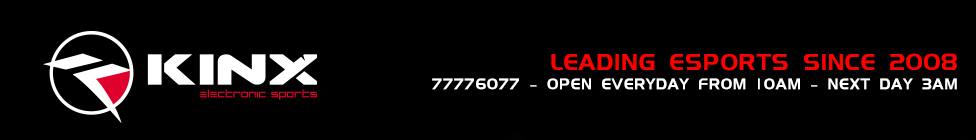
<style>
.page{position:relative;width:976px;height:140px;background:#000000}
.page>*{position:absolute;margin:0}
.t1{font:16px "AGOmniusBold";color:#ffffff}
.t2{font:24px "AGOmniusBold";color:#ff0000}
</style>
<div class="page">
<p class="t1" style="left:432px;top:53px;width:525px;height:37px;text-align:right"><span class="t2">LEADING ESPORTS SINCE 2008<br></span>77776077 - OPEN EVERYDAY FROM 10AM - NEXT DAY 3AM</p>
</div>
